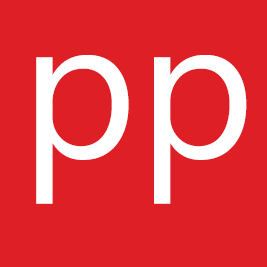
<style>
.page{position:relative;width:267px;height:267px;background:#df1f26}
.page>*{position:absolute;margin:0}
.t1{font:200.2px "MyanmarText";color:#ffffff}
</style>
<div class="page">
<p class="t1" style="left:36px;top:55px;width:211px;height:149px">pp</p>
</div>
